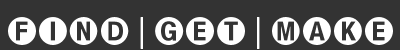
<style>
.page{position:relative;width:400px;height:50px;background:#333333}
.page>*{position:absolute;margin:0}
.t1{font:31.6px "PiOneFiveFiveZero";letter-spacing:-0.01em;color:#ffffff}
</style>
<div class="page">
<p class="t1" style="left:8px;top:17px;width:385px;height:32px">FIND - GET - MAKE</p>
</div>
